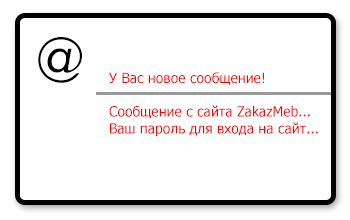
<style>
.page{position:relative;width:350px;height:220px;background:#ffffff}
.page>*{position:absolute;margin:0}
.t1{font:60px "CenturyGothic";letter-spacing:-0.05em;color:#000000}
.t2{font:14px "Tahoma";color:#ff0000}
</style>
<div class="page">
<p class="t1" style="left:38px;top:37px;width:44px;height:46px">@</p>
<p class="t2" style="left:109px;top:72px;width:209px;height:65px;text-align:right">У Вас новое сообщение!<br><br>Сообщение с сайта ZakazMeb...<br>Ваш пароль для входа на сайт...</p>
</div>
